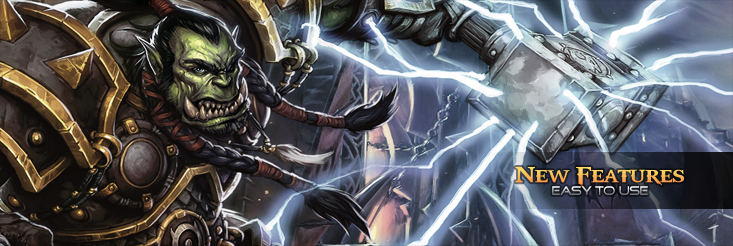
<style>
.page{position:relative;width:733px;height:246px}
.page>*{position:absolute;margin:0}
.t1{font:24px "GodOfWar";letter-spacing:-0.04em}
.t2{font:12px "GoodTimes";letter-spacing:-0.04em}
</style>
<div class="page">
<p class="t1" style="left:515px;top:167px;width:170px;height:20px">New Features</p>
<p class="t2" style="left:552px;top:186px;width:96px;height:9px">Easy to Use</p>
</div>
